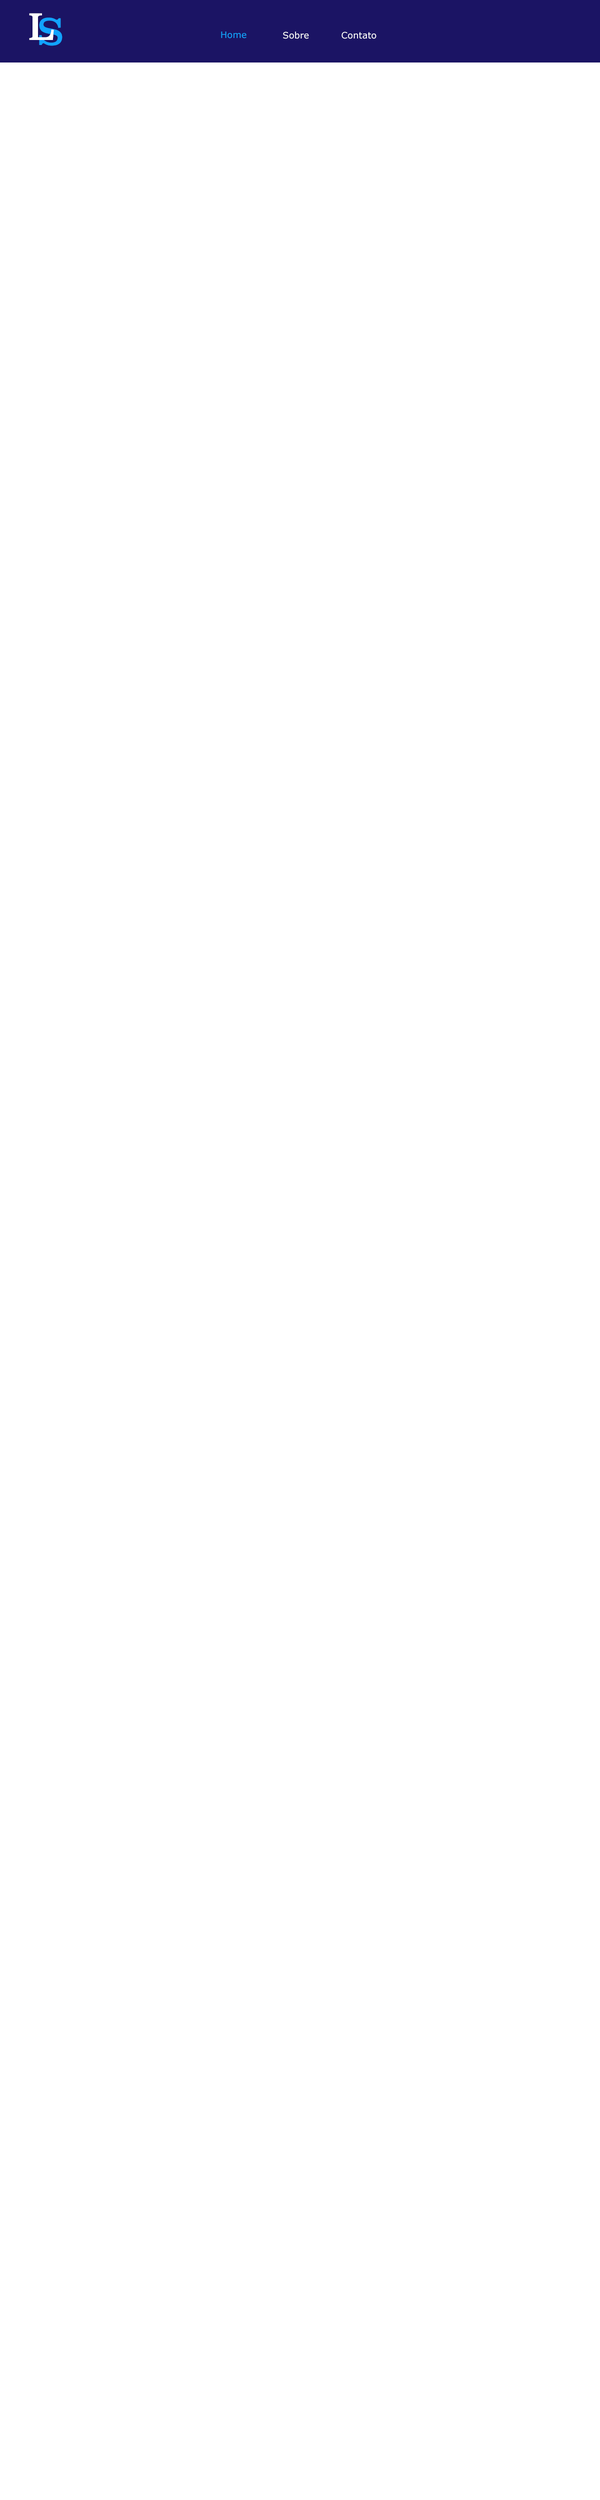
<style>
.page{position:relative;width:600px;height:2500px;background:#ffffff}
.page>*{position:absolute;margin:0}
.t1{font:36px "Superclarendon-Regular";color:#ffffff}
.t2{font:36px "Superclarendon-Regular";color:#11a3ff}
.t3{font:9px "Verdana";color:#11a3ff}
.t4{font:9px "Verdana";color:#ffffff}
</style>
<div class="page">
<p class="t1" style="left:29px;top:13px;width:25px;height:27px">L</p>
<p class="t2" style="left:39px;top:18px;width:23px;height:28px">S</p>
<p class="t3" style="left:221px;top:32px;width:25px;height:6px">Home</p>
<p class="t4" style="left:283px;top:32px;width:26px;height:7px">Sobre</p>
<p class="t4" style="left:342px;top:32px;width:34px;height:7px">Contato</p>
</div>
